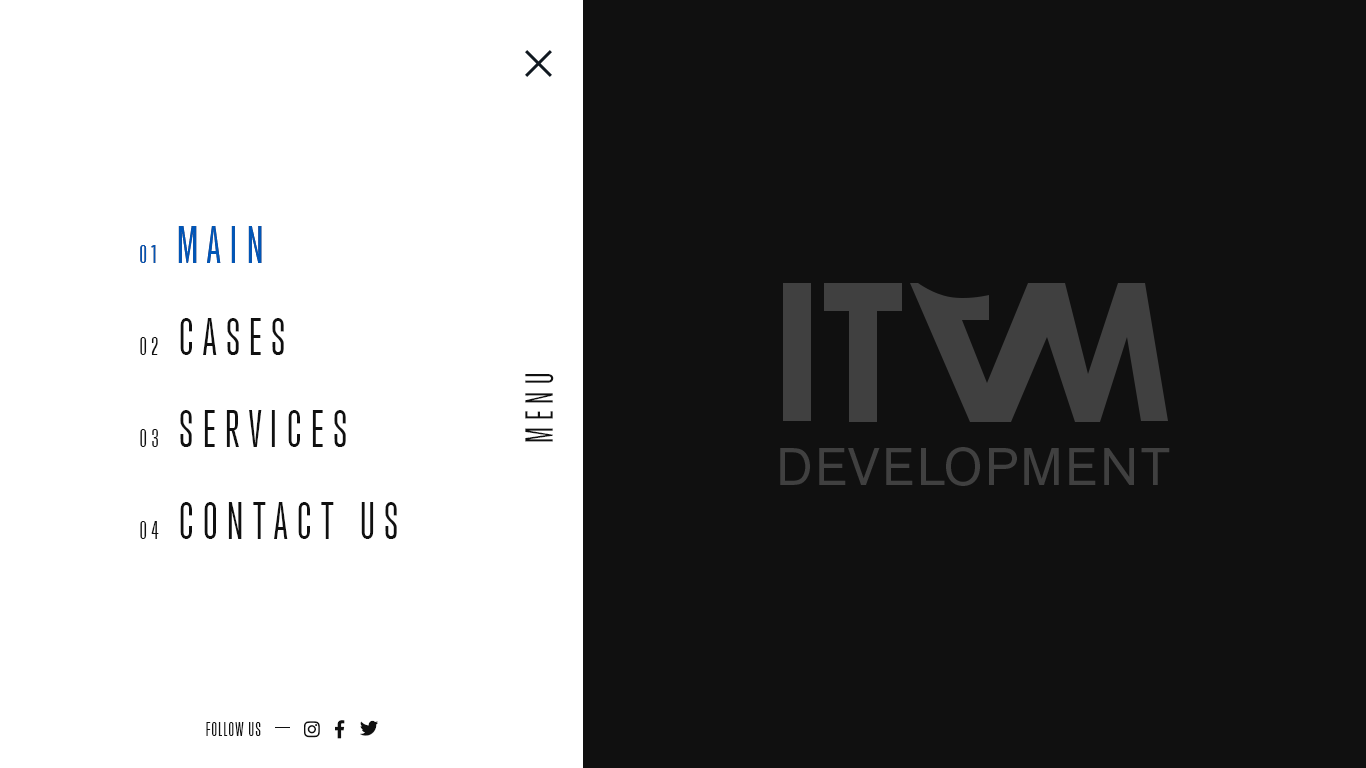
<style>
.page{position:relative;width:1366px;height:768px;background:#101010}
.page>*{position:absolute;margin:0}
.t1{font:48px "TrumpGothicWest";letter-spacing:0.2em;color:#0056b8;text-transform:uppercase}
.t2{font:24px "TrumpGothicWest";letter-spacing:0.2em;color:#0056b8;text-transform:uppercase}
.t3{font:48px "TrumpGothicWest";letter-spacing:0.2em;color:#101010;text-transform:uppercase}
.t4{font:24px "TrumpGothicWest";letter-spacing:0.2em;color:#101010;text-transform:uppercase}
.t5{font:36px "TrumpGothicWest";letter-spacing:0.2em;color:#101010;text-transform:uppercase}
.t6{font:18px "TrumpGothicWest";letter-spacing:0.075em;color:#101010;text-transform:uppercase}
</style>
<div class="page">
<p class="t1" style="left:140px;top:226px;width:122px;height:37px"><span class="t2">01 </span>main</p>
<p class="t1" style="left:140px;top:226px;width:122px;height:37px"><span class="t2">01 </span>main</p>
<p class="t3" style="left:140px;top:318px;width:144px;height:37px"><span class="t4">02 </span>cases</p>
<p class="t5" style="left:525px;top:374px;width:29px;height:68px;rotate:-90deg">menu</p>
<p class="t3" style="left:140px;top:410px;width:206px;height:37px"><span class="t4">03 </span>services</p>
<p class="t3" style="left:140px;top:502px;width:257px;height:37px"><span class="t4">04 </span>contact us</p>
<p class="t6" style="left:206px;top:722px;width:55px;height:14px">follow us</p>
</div>
